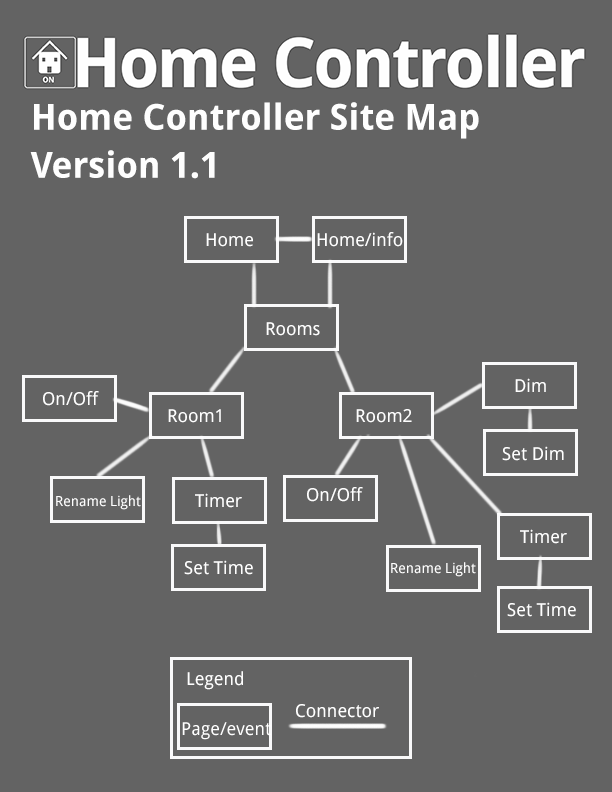
<style>
.page{position:relative;width:612px;height:792px;background:#636363}
.page>*{position:absolute;margin:0}
.t1{font:36px/24px "DroidSans-Bold";color:#fefefe}
.t2{font:18px "DroidSans";color:#fefefe}
.t3{font:14px "DroidSans";color:#fefefe}
.t4{font:18px "DroidSans";color:#ffffff}
</style>
<div class="page">
<p class="t1" style="left:30px;top:102px;width:449px;height:77px">Home Controller Site Map<br><br>Version 1.1</p>
<p class="t2" style="left:206px;top:233px;width:47px;height:14px">Home</p>
<p class="t2" style="left:317px;top:232px;width:86px;height:15px">Home/info</p>
<p class="t2" style="left:266px;top:322px;width:54px;height:14px">Rooms</p>
<p class="t2" style="left:515px;top:378px;width:31px;height:14px">Dim</p>
<p class="t2" style="left:43px;top:391px;width:56px;height:15px">On/Off</p>
<p class="t2" style="left:168px;top:409px;width:53px;height:14px">Room1</p>
<p class="t2" style="left:356px;top:409px;width:56px;height:14px">Room2</p>
<p class="t2" style="left:502px;top:446px;width:62px;height:15px">Set Dim</p>
<p class="t3" style="left:56px;top:495px;width:85px;height:15px">Rename Light</p>
<p class="t2" style="left:195px;top:493px;width:47px;height:15px">Timer</p>
<p class="t2" style="left:307px;top:487px;width:56px;height:15px">On/Off</p>
<p class="t2" style="left:520px;top:529px;width:47px;height:15px">Timer</p>
<p class="t2" style="left:184px;top:560px;width:69px;height:15px">Set Time</p>
<p class="t3" style="left:391px;top:562px;width:85px;height:15px">Rename Light</p>
<p class="t2" style="left:507px;top:602px;width:69px;height:15px">Set Time</p>
<p class="t2" style="left:187px;top:671px;width:56px;height:19px">Legend</p>
<p class="t4" style="left:296px;top:704px;width:83px;height:14px">Connector</p>
</div>
